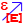
<style>
.page{position:relative;width:24px;height:24px;background:#ffffff}
.page>*{position:absolute;margin:0}
.t1{font:12px "CopperplateGothic-Bold";color:#ff0000}
</style>
<div class="page">
<p class="t1" style="left:6px;top:13px;width:16px;height:10px">[E]</p>
</div>
